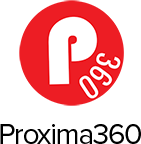
<style>
.page{position:relative;width:141px;height:144px;background:#ffffff}
.page>*{position:absolute;margin:0}
.t1{font:30px "ProximaNova-Regular";letter-spacing:-0.05em;color:#000000}
</style>
<div class="page">
<p class="t1" style="left:0px;top:124px;width:141px;height:20px">Proxima360</p>
</div>
